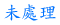
<style>
.page{position:relative;width:60px;height:25px;background:#ffffff}
.page>*{position:absolute;margin:0}
.t1{font:18px "DFKaiShu-SB-Estd-BF";color:#0173ff}
</style>
<div class="page">
<p class="t1" style="left:4px;top:4px;width:52px;height:17px">未處理</p>
</div>
